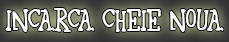
<style>
.page{position:relative;width:229px;height:42px}
.page>*{position:absolute;margin:0}
.t1{font:25px "42";color:#ffffff;scale:0.85 1}
</style>
<div class="page">
<p class="t1" style="left:5px;top:8px;width:219px;height:24px">Incarca cheie noua</p>
</div>
